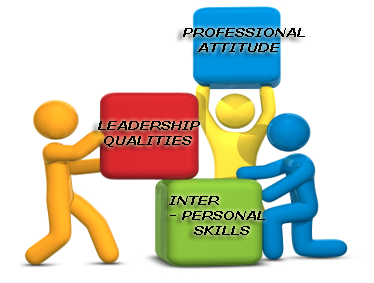
<style>
.page{position:relative;width:374px;height:283px;background:#ffffff}
.page>*{position:absolute;margin:0}
.t1{font:12.3px "Verdana-BoldItalic";color:#000000;scale:1.13 1}
</style>
<div class="page">
<p class="t1" style="left:183px;top:28px;width:122px;height:24px">PROFESSIONAL <br>   ATTITUDE</p>
<p class="t1" style="left:98px;top:121px;width:102px;height:26px">LEADERSHIP <br> QUALITIES</p>
<p class="t1" style="left:169px;top:196px;width:96px;height:39px">INTER <br>- PERSONAL <br>     SKILLS</p>
</div>
